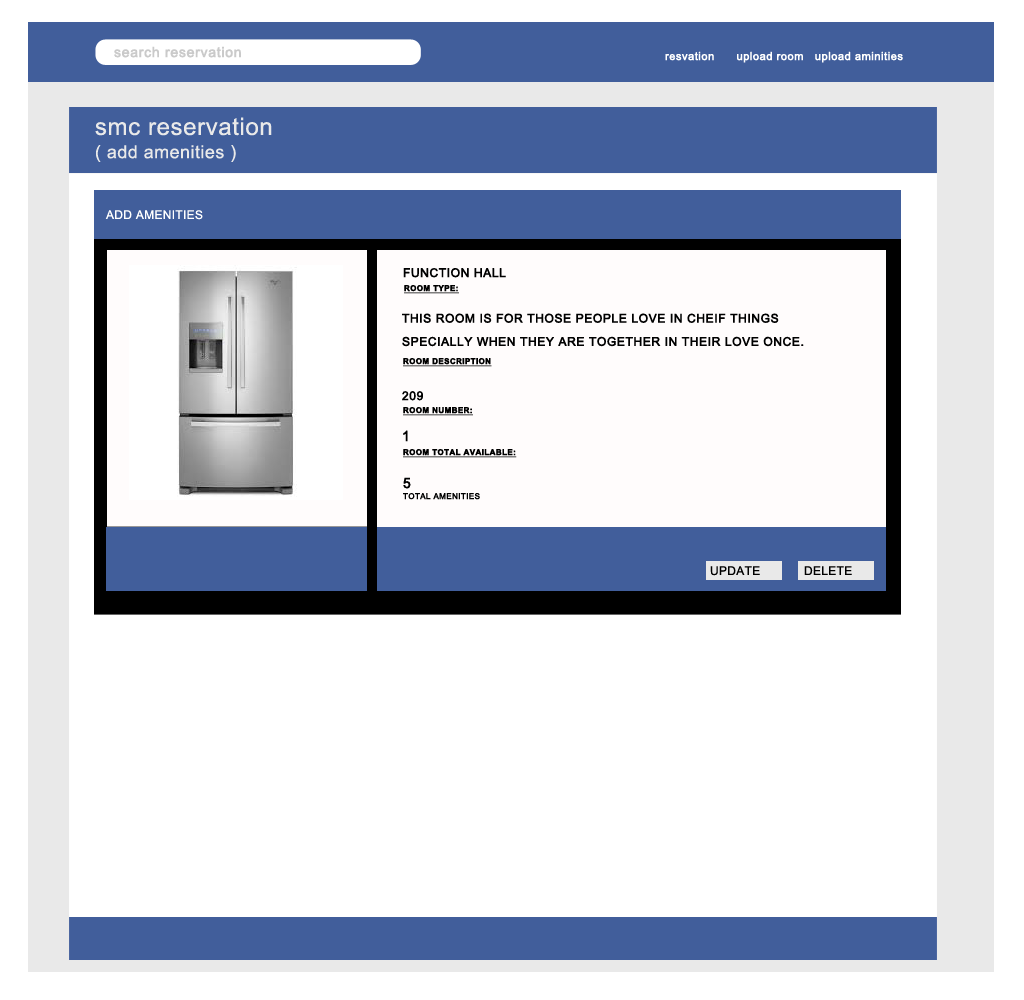
<style>
.page{position:relative;width:1024px;height:1000px;background:#ffffff}
.page>*{position:absolute;margin:0}
.t1{font:14px "ArialMT";letter-spacing:0.025em;color:#cacaca;font-weight:bold}
.t2{font:11px "ArialMT";letter-spacing:0.025em;color:#ffffff;font-weight:bold}
.t3{font:18px/11.6px "ArialMT";letter-spacing:0.025em;color:#e9e9e9}
.t4{font:24px/11.6px "ArialMT";letter-spacing:0.025em;color:#e9e9e9}
.t5{font:12px "ArialMT";letter-spacing:0.025em;color:#ffffff}
.t6{font:12px "ArialMT";letter-spacing:0.025em;color:#000000;font-weight:bold}
.t7{font:8px "Arial-BoldMT";letter-spacing:0.025em;color:#000000;font-weight:bold;text-decoration:underline}
.t8{font:12px/11.6px "ArialMT";letter-spacing:0.025em;color:#000000;font-weight:bold}
.t9{font:14px "ArialMT";letter-spacing:0.025em;color:#000000;font-weight:bold}
.t10{font:8px "ArialMT";letter-spacing:0.025em;color:#000000;font-weight:bold}
.t11{font:12px "ArialMT";letter-spacing:0.025em;color:#000000}
</style>
<div class="page">
<p class="t1" style="left:114px;top:46px;width:127px;height:12px">search reservation</p>
<p class="t2" style="left:665px;top:51px;width:238px;height:12px">resvation      upload room   upload aminities</p>
<p class="t3" style="left:95px;top:117px;width:177px;height:45px"><span class="t4">smc reservation <br><br></span>( add amenities )</p>
<p class="t5" style="left:105px;top:210px;width:98px;height:10px">ADD AMENITIES</p>
<p class="t6" style="left:403px;top:268px;width:103px;height:10px">FUNCTION HALL</p>
<p class="t7" style="left:404px;top:285px;width:55px;height:9px">ROOM TYPE:</p>
<p class="t8" style="left:402px;top:313px;width:402px;height:34px">THIS ROOM IS FOR THOSE PEOPLE LOVE IN CHEIF THINGS <br><br>SPECIALLY WHEN THEY ARE TOGETHER IN THEIR LOVE ONCE.</p>
<p class="t7" style="left:403px;top:358px;width:89px;height:9px">ROOM DESCRIPTION</p>
<p class="t6" style="left:402px;top:391px;width:21px;height:10px">209</p>
<p class="t7" style="left:403px;top:407px;width:70px;height:9px">ROOM NUMBER:</p>
<p class="t9" style="left:403px;top:430px;width:5px;height:12px">1</p>
<p class="t7" style="left:403px;top:449px;width:114px;height:9px">ROOM TOTAL AVAILABLE:</p>
<p class="t9" style="left:403px;top:477px;width:8px;height:12px">5</p>
<p class="t10" style="left:403px;top:493px;width:77px;height:7px">TOTAL AMENITIES</p>
<p class="t11" style="left:710px;top:566px;width:50px;height:10px">UPDATE</p>
<p class="t11" style="left:804px;top:566px;width:48px;height:9px">DELETE</p>
</div>
